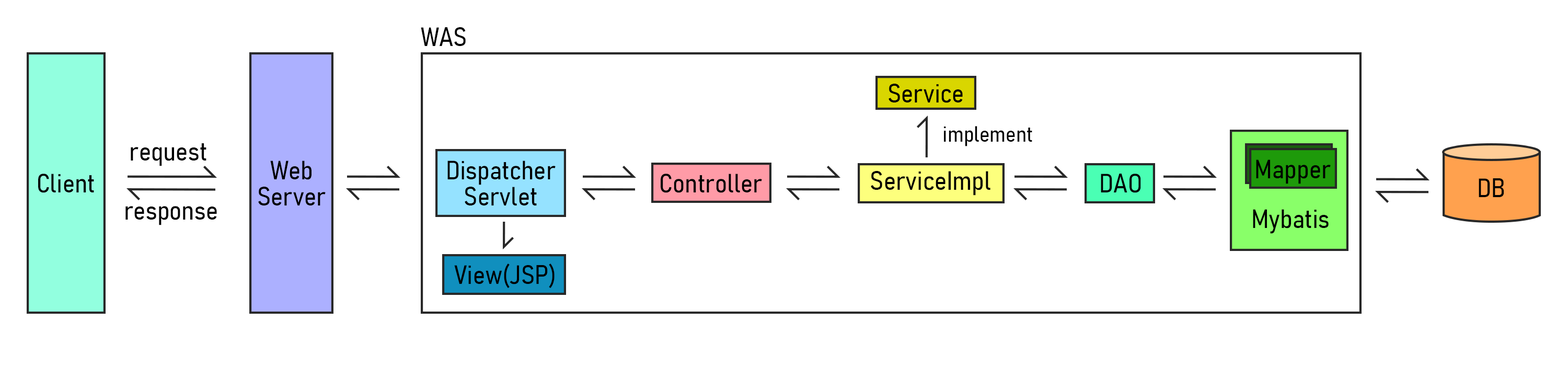
<style>
.page{position:relative;width:1568px;height:366px;background:#ffffff}
.page>*{position:absolute;margin:0}
.t1{font:26.1px "Bahnschrift-SemiLightSemiCondensed";color:#000000}
.t2{font:21.8px "Bahnschrift-SemiLightSemiCondensed";color:#000000}
.t3{font:26.1px/26.1px "Bahnschrift-SemiLightSemiCondensed";color:#000000}
</style>
<div class="page">
<p class="t1" style="left:421px;top:27px;width:45px;height:19px">WAS</p>
<p class="t1" style="left:889px;top:84px;width:74px;height:19px">Service</p>
<p class="t2" style="left:944px;top:126px;width:88px;height:20px">implement</p>
<p class="t1" style="left:131px;top:143px;width:75px;height:23px">request</p>
<p class="t3" style="left:258px;top:160px;width:68px;height:45px;text-align:center">Web<br>Server</p>
<p class="t3" style="left:447px;top:160px;width:109px;height:45px;text-align:center">Dispatcher<br>Servlet</p>
<p class="t1" style="left:1256px;top:159px;width:75px;height:25px">Mapper</p>
<p class="t1" style="left:38px;top:174px;width:56px;height:19px">Client</p>
<p class="t1" style="left:661px;top:174px;width:101px;height:19px">Controller</p>
<p class="t1" style="left:871px;top:171px;width:119px;height:24px">ServiceImpl</p>
<p class="t1" style="left:1101px;top:174px;width:40px;height:19px">DAO</p>
<p class="t1" style="left:1479px;top:178px;width:25px;height:19px">DB</p>
<p class="t1" style="left:125px;top:206px;width:92px;height:19px">response</p>
<p class="t1" style="left:1253px;top:209px;width:76px;height:25px">Mybatis</p>
<p class="t1" style="left:454px;top:263px;width:101px;height:25px">View(JSP)</p>
</div>
